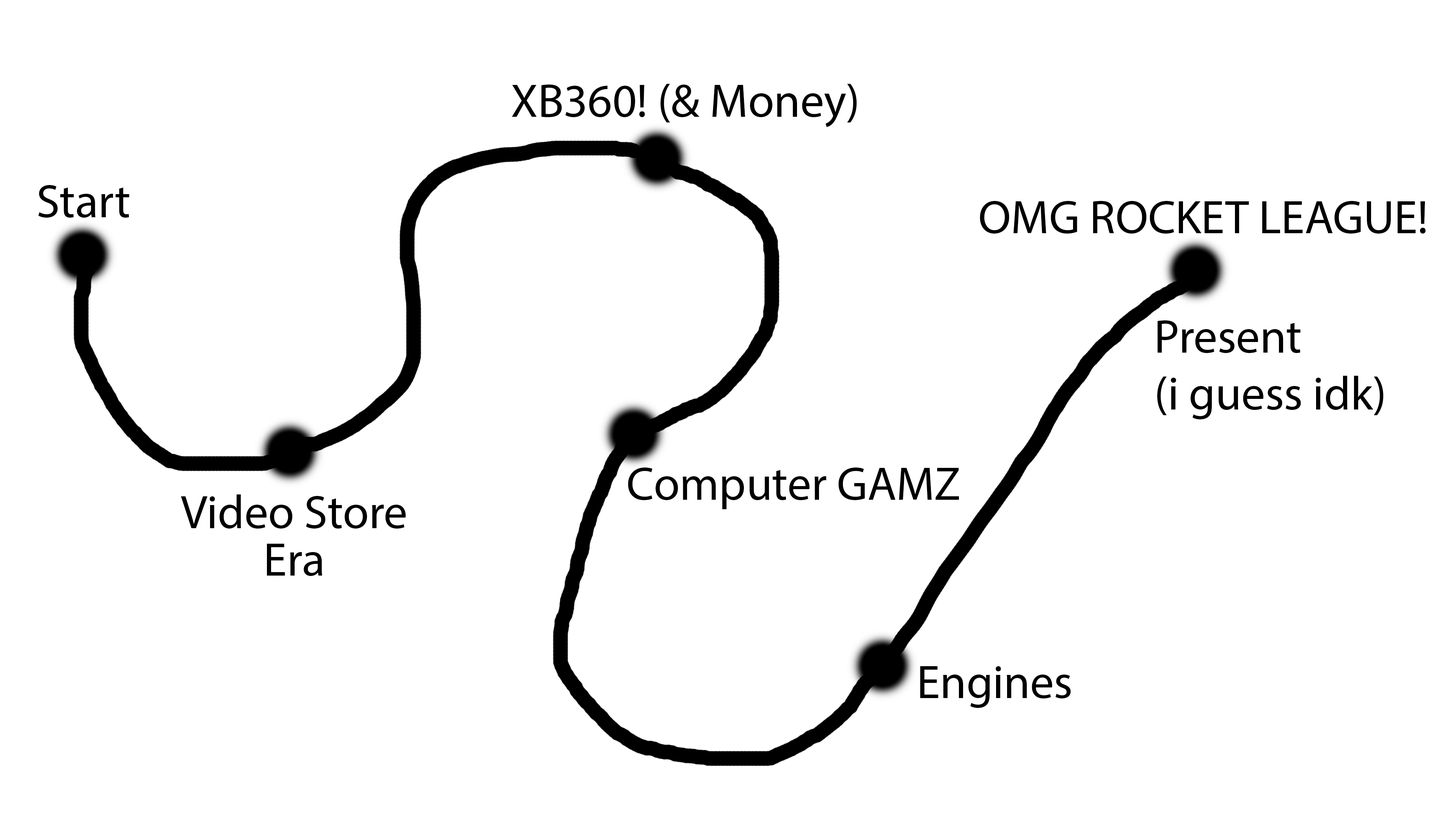
<style>
.page{position:relative;width:1456px;height:819px;background:#ffffff}
.page>*{position:absolute;margin:0}
.t1{font:47.4px "MyriadPro-Regular";color:#000000}
.t2{font:47.4px/47.4px "MyriadPro-Regular";color:#000000}
</style>
<div class="page">
<p class="t1" style="left:512px;top:84px;width:345px;height:43px">XB360! (&amp; Money)</p>
<p class="t1" style="left:38px;top:185px;width:91px;height:33px">Start</p>
<p class="t1" style="left:980px;top:201px;width:446px;height:33px">OMG ROCKET LEAGUE!</p>
<p class="t1" style="left:1157px;top:320px;width:227px;height:100px">Present<br>(i guess idk)</p>
<p class="t1" style="left:628px;top:467px;width:331px;height:42px">Computer GAMZ</p>
<p class="t2" style="left:181px;top:494px;width:225px;height:82px;text-align:center">Video Store<br>Era</p>
<p class="t1" style="left:920px;top:666px;width:151px;height:42px">Engines</p>
</div>
